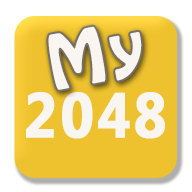
<style>
.page{position:relative;width:192px;height:192px;background:#edc22e}
.page>*{position:absolute;margin:0}
.t1{font:67.2px "HoboStd";letter-spacing:0.08em;color:#f9f6f2}
.t2{font:63.3px "MicrosoftNewTaiLue-Bold";letter-spacing:0.04em;color:#f9f6f2;font-weight:bold;scale:0.9 1}
</style>
<div class="page">
<p class="t1" style="left:48px;top:26px;width:94px;height:64px;rotate:-11deg">My</p>
<p class="t2" style="left:26px;top:92px;width:139px;height:47px">2048</p>
</div>
